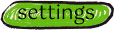
<style>
.page{position:relative;width:114px;height:30px}
.page>*{position:absolute;margin:0}
.t1{font:20px "Gotu-Regular";color:#000000}
</style>
<div class="page">
<p class="t1" style="left:18px;top:4px;width:77px;height:21px">settings</p>
</div>
